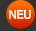
<style>
.page{position:relative;width:36px;height:31px;background:#333333}
.page>*{position:absolute;margin:0}
.t1{font:12px "Arial-BoldMT";letter-spacing:-0.08em;color:#ffffff}
</style>
<div class="page">
<p class="t1" style="left:9px;top:10px;width:22px;height:9px">NEU</p>
</div>
